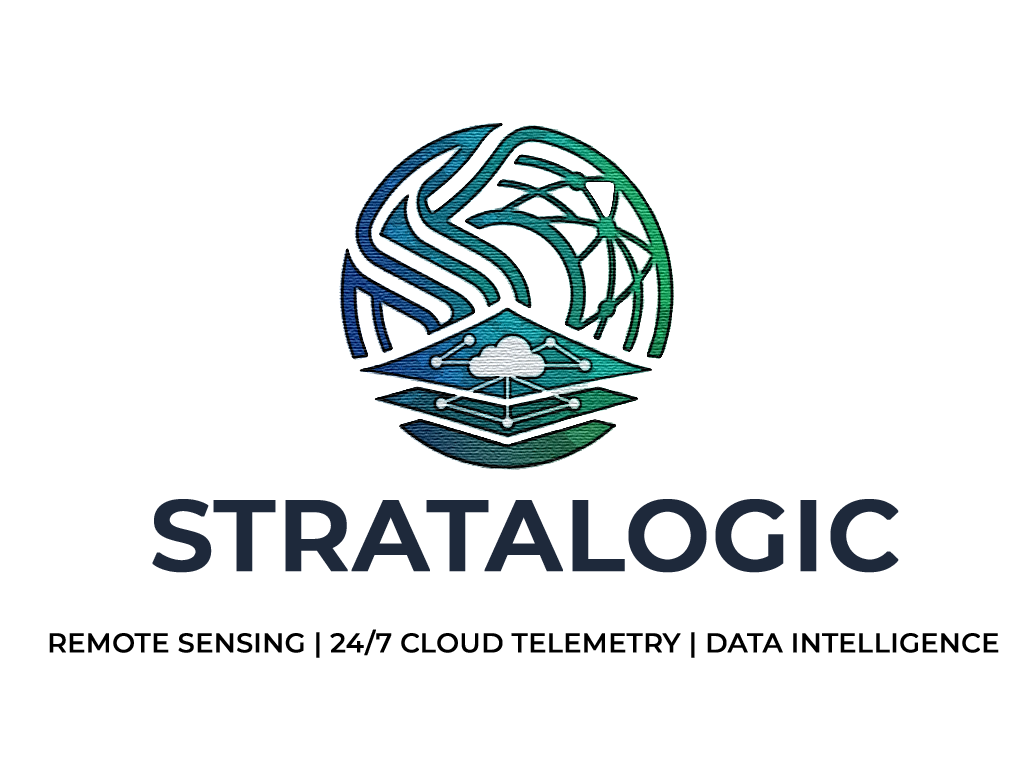
<style>
.page{position:relative;width:1024px;height:768px;background:#ffffff}
.page>*{position:absolute;margin:0}
.t1{font:100px "Montserrat-SemiBold";color:#1e293b;font-weight:bold}
.t2{font:26.7px "Montserrat-Medium";color:#000000;font-weight:bold}
</style>
<div class="page">
<p class="t1" style="left:152px;top:499px;width:747px;height:74px">STRATALOGIC</p>
<p class="t2" style="left:49px;top:629px;width:950px;height:29px">REMOTE SENSING | 24/7 CLOUD TELEMETRY | DATA INTELLIGENCE</p>
</div>
